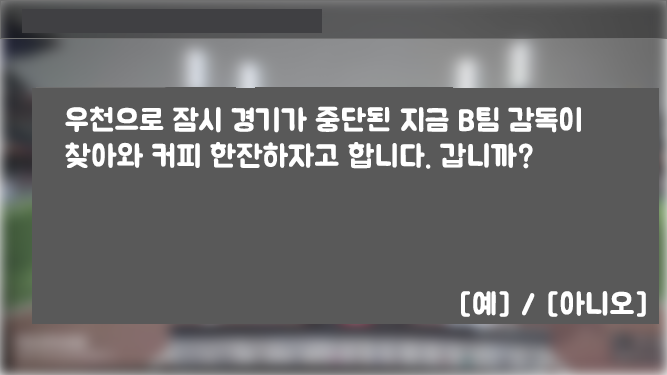
<style>
.page{position:relative;width:667px;height:375px;background:#595959}
.page>*{position:absolute;margin:0}
.t1{font:30px "BMJUA";color:#ffffff;font-weight:bold}
</style>
<div class="page">
<p class="t1" style="left:65px;top:106px;width:516px;height:63px">우천으로 잠시 경기가 중단된 지금 B팀 감독이 <br>찾아와 커피 한잔하자고 합니다. 갑니까?</p>
<p class="t1" style="left:461px;top:291px;width:185px;height:26px">[예] / [아니오]</p>
</div>
